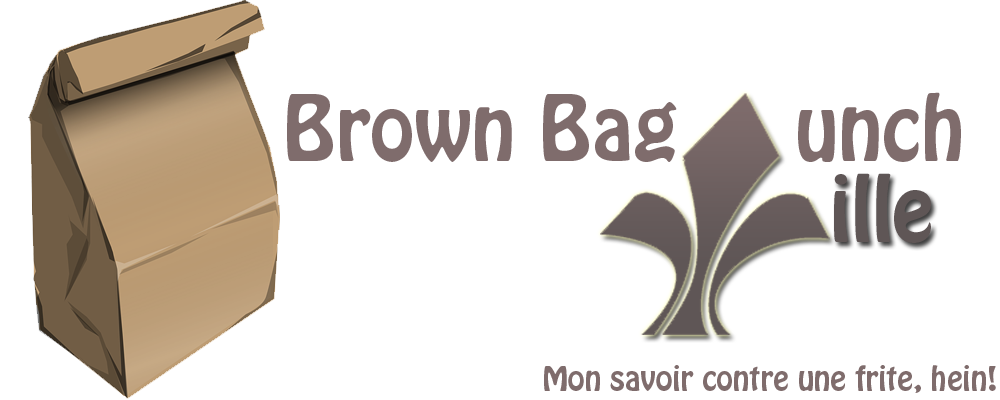
<style>
.page{position:relative;width:1000px;height:400px;background:#ffffff}
.page>*{position:absolute;margin:0}
.t1{font:80px "HoboStd";color:#7f6c6c}
.t2{font:80px "HoboStd";color:#5f5656}
.t3{font:30px "HoboStd";color:#7f6c6c}
</style>
<div class="page">
<p class="t1" style="left:287px;top:92px;width:674px;height:70px">Brown Bag     unch</p>
<p class="t2" style="left:834px;top:173px;width:97px;height:70px">ille</p>
<p class="t3" style="left:544px;top:365px;width:452px;height:28px">Mon savoir contre une frite, hein!</p>
</div>
